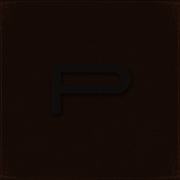
<style>
.page{position:relative;width:180px;height:180px;background:#150a06}
.page>*{position:absolute;margin:0}
.t1{font:100px "7days";color:#100c0b;font-weight:bold}
</style>
<div class="page">
<p class="t1" style="left:51px;top:64px;width:80px;height:51px">p</p>
</div>
